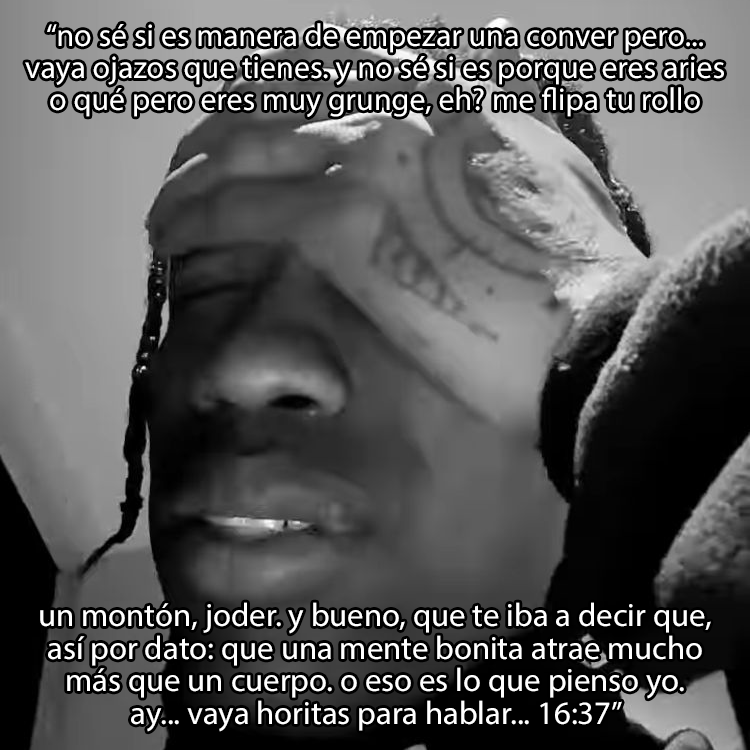
<style>
.page{position:relative;width:750px;height:750px}
.page>*{position:absolute;margin:0}
.t1{font:32px "MyriadPro-Regular";color:#ffffff}
.t2{font:32.7px "MyriadPro-Regular";color:#ffffff}
</style>
<div class="page">
<p class="t1" style="left:25px;top:23px;width:699px;height:94px;text-align:center">“no sé si es manera de empezar una conver pero...<br>vaya ojazos que tienes. y no sé si es porque eres aries<br>o qué pero eres muy grunge, eh? me flipa tu rollo</p>
<p class="t2" style="left:40px;top:602px;width:671px;height:130px;text-align:center">un montón, joder. y bueno, que te iba a decir que,<br>así por dato: que una mente bonita atrae mucho<br>más que un cuerpo. o eso es lo que pienso yo.<br>ay... vaya horitas para hablar... 16:37”</p>
</div>
